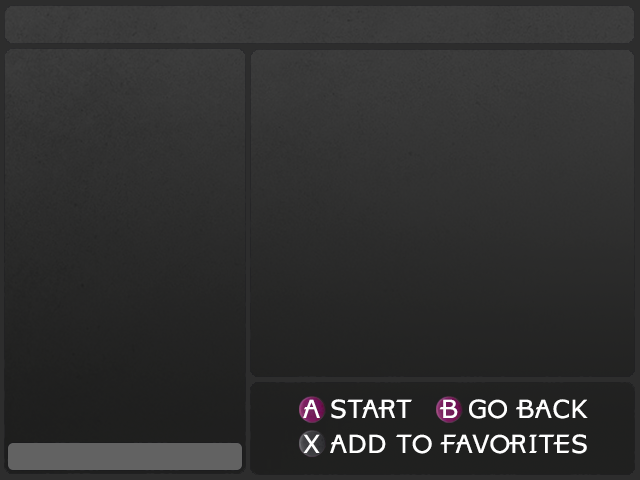
<style>
.page{position:relative;width:640px;height:480px}
.page>*{position:absolute;margin:0}
.t1{font:25px "XBOX360";letter-spacing:0.02em;color:#ffffff}
</style>
<div class="page">
<p class="t1" style="left:303px;top:399px;width:109px;height:20px">A START</p>
<p class="t1" style="left:439px;top:399px;width:149px;height:20px">B GO BACK</p>
<p class="t1" style="left:303px;top:434px;width:284px;height:20px">X ADD TO FAVORITES</p>
</div>
